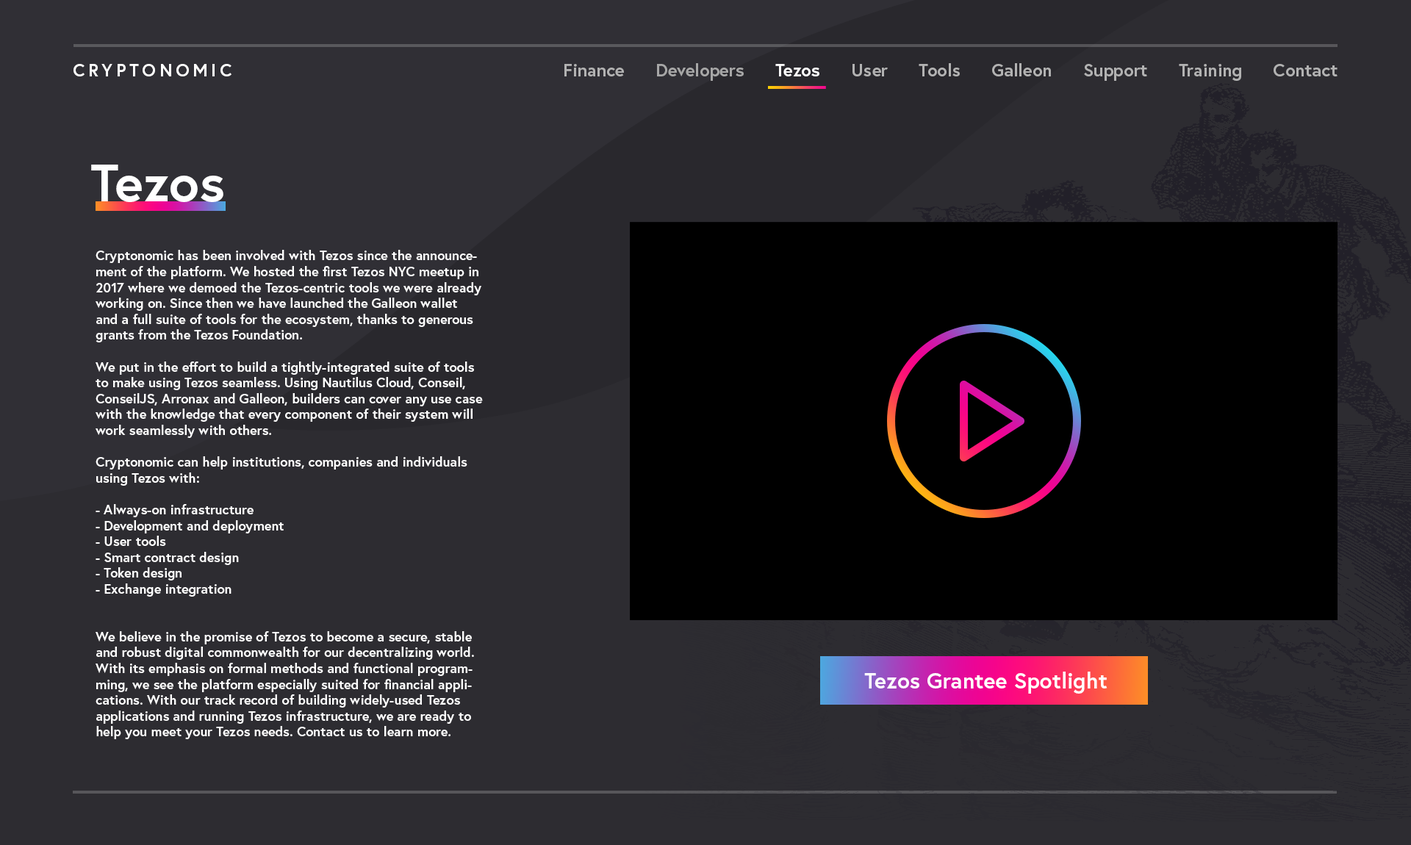
<style>
.page{position:relative;width:1411px;height:845px;background:#2d2c31}
.page>*{position:absolute;margin:0}
.t1{font:17.6px "Europa-Bold";letter-spacing:0.2em;color:#ffffff;text-transform:uppercase}
.t2{font:17.6px "Europa-Bold";color:#b2b2b2}
.t3{font:17.6px "Europa-Bold";color:#a7a7a7}
.t4{font:17.6px "Europa-Bold";color:#ffffff}
.t5{font:52.9px "Europa-Bold";color:#ffffff}
.t6{font:13.2px "Europa-Bold";color:#ffffff}
.t7{font:22px "Europa-Bold";color:#ffffff}
</style>
<div class="page">
<p class="t1" style="left:73px;top:64px;width:158px;height:12px">CryptoNOMIC</p>
<p class="t2" style="left:564px;top:63px;width:773px;height:18px">Finance      <span class="t3">Developers      </span><span class="t4">Tezos      </span>User      Tools      Galleon      Support      Training      Contact</p>
<p class="t5" style="left:91px;top:165px;width:132px;height:37px">Tezos</p>
<p class="t6" style="left:96px;top:250px;width:387px;height:489px">Cryptonomic has been involved with Tezos since the announcement of the platform. We hosted the first Tezos NYC meetup in 2017 where we demoed the Tezos-centric tools we were already working on. Since then we have launched the Galleon wallet and a full suite of tools for the ecosystem, thanks to generous grants from the Tezos Foundation.<br><br>We put in the effort to build a tightly-integrated suite of tools to make using Tezos seamless. Using Nautilus Cloud, Conseil, ConseilJS, Arronax and Galleon, builders can cover any use case with the knowledge that every component of their system will work seamlessly with others. <br><br>Cryptonomic can help institutions, companies and individuals using Tezos with:<br><br>- Always-on infrastructure<br>- Development and deployment<br>- User tools<br>- Smart contract design<br>- Token design<br>- Exchange integration<br><br><br>We believe in the promise of Tezos to become a secure, stable and robust digital commonwealth for our decentralizing world. With its emphasis on formal methods and functional programming, we see the platform especially suited for financial applications. With our track record of building widely-used Tezos applications and running Tezos infrastructure, we are ready to help you meet your Tezos needs. Contact us to learn more.</p>
<p class="t7" style="left:864px;top:672px;width:243px;height:22px">Tezos Grantee Spotlight</p>
</div>
